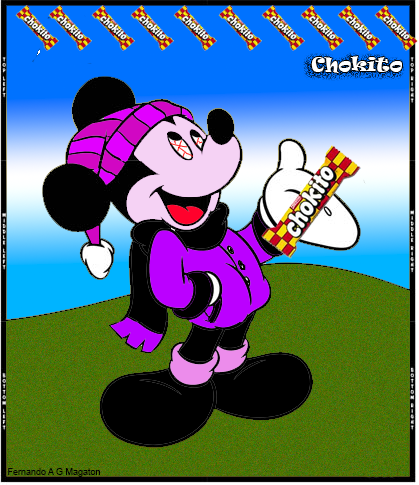
<style>
.page{position:relative;width:419px;height:485px}
.page>*{position:absolute;margin:0}
.t1{font:18px "Ravie";color:#ffffff}
.t2{font:9px "ArialMT";color:#000000}
</style>
<div class="page">
<p class="t1" style="left:311px;top:56px;width:91px;height:17px">Chokito</p>
<p class="t2" style="left:8px;top:468px;width:92px;height:9px">Fernando A G Magaton</p>
</div>
